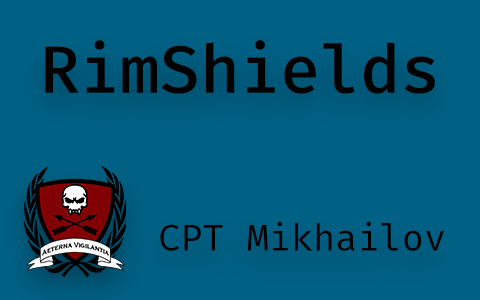
<style>
.page{position:relative;width:480px;height:300px;background:#006185}
.page>*{position:absolute;margin:0}
.t1{font:66.9px "FiraCode-Medium";color:#010000}
.t2{font:36.9px "FiraCode-Regular";color:#000000}
</style>
<div class="page">
<p class="t1" style="left:45px;top:40px;width:390px;height:54px">RimShields</p>
<p class="t2" style="left:160px;top:221px;width:284px;height:30px">CPT Mikhailov</p>
</div>
